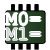
<style>
.page{position:relative;width:50px;height:50px;background:#ffffff}
.page>*{position:absolute;margin:0}
.t1{font:20px "CourierNewPSMT";color:#ffffff}
.t2{font:20px "CourierNewPSMT";color:#c8c8c8}
</style>
<div class="page">
<p class="t1" style="left:5px;top:12px;width:36px;height:14px">M0=</p>
<p class="t2" style="left:5px;top:27px;width:36px;height:13px">M1=</p>
</div>
